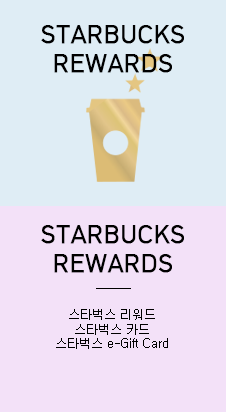
<style>
.page{position:relative;width:226px;height:412px;background:#f3e1f8}
.page>*{position:absolute;margin:0}
.t1{font:24px "HCRDotum";color:#000000;font-weight:bold}
.t2{font:12px "New-Gulim";color:#000000}
.t3{font:12px/120px "New-Gulim";color:#000000}
</style>
<div class="page">
<p class="t1" style="left:41px;top:25px;width:143px;height:48px;text-align:center">STARBUCKS<br>REWARDS</p>
<p class="t1" style="left:41px;top:225px;width:143px;height:48px;text-align:center">STARBUCKS<br>REWARDS</p>
<p class="t2" style="left:56px;top:309px;width:112px;height:40px;text-align:center"><span class="t3">스타벅스 리워드<br></span>스타벅스 카드<br>스타벅스 e-Gift Card</p>
</div>
